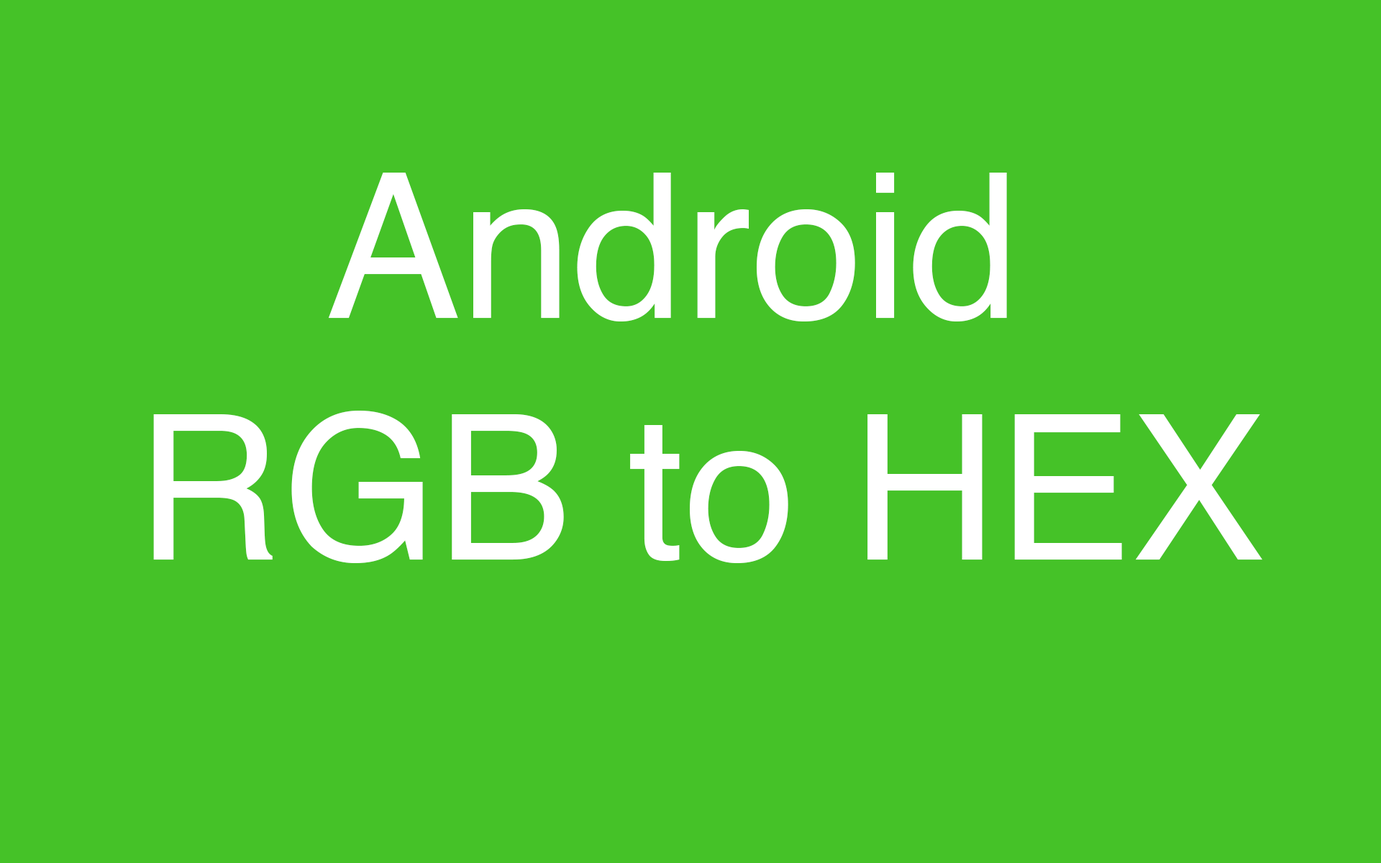
<style>
.page{position:relative;width:1381px;height:863px;background:#45c228}
.page>*{position:absolute;margin:0}
.t1{font:201.4px "Helvetica";color:#ffffff}
</style>
<div class="page">
<p class="t1" style="left:153px;top:173px;width:1110px;height:390px;text-align:center">Android <br>RGB to HEX</p>
</div>
